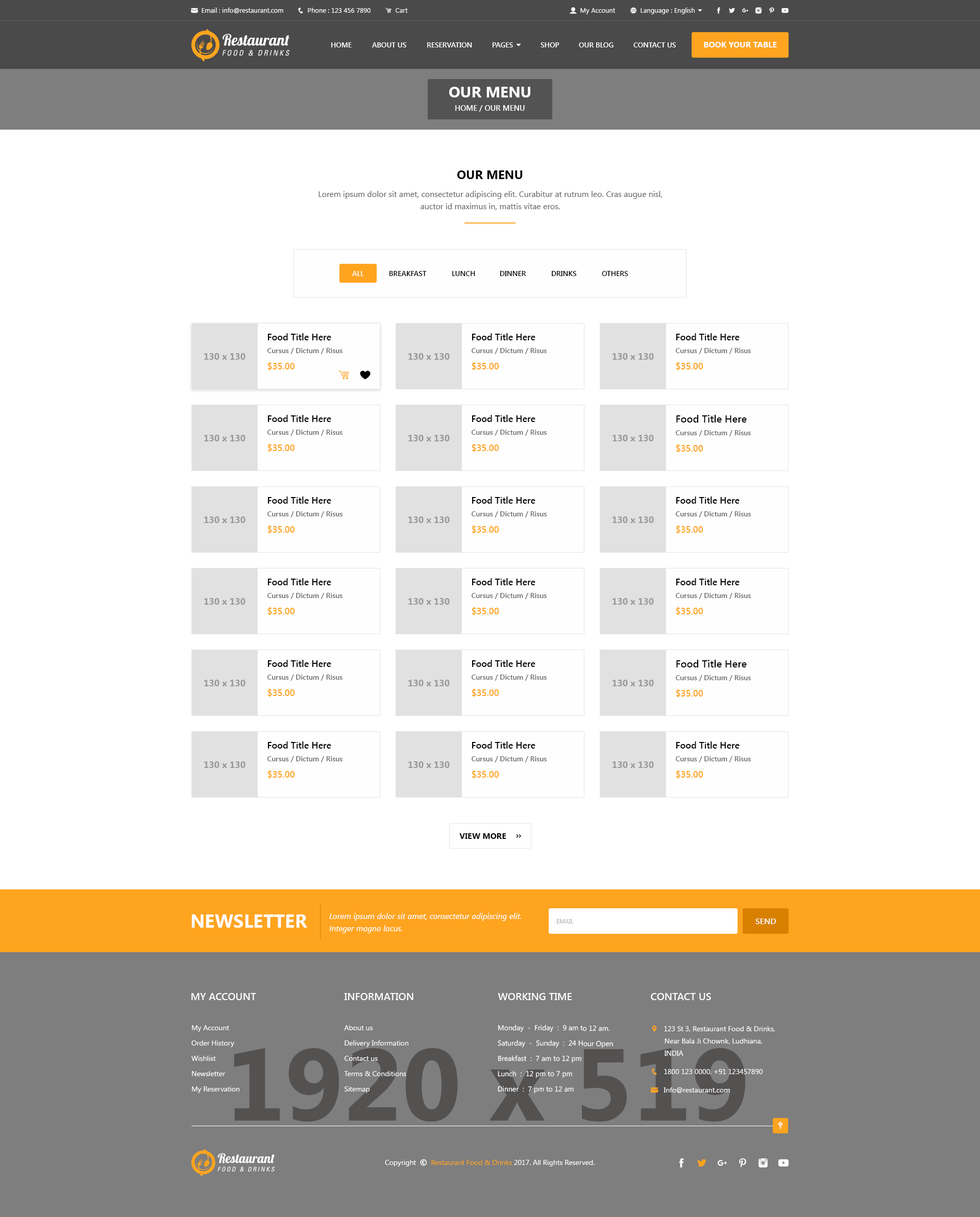
<style>
.page{position:relative;width:980px;height:1217px;background:#ffffff}
.page>*{position:absolute;margin:0}
.t1{font:8.2px "SegoeUI-Bold";color:#ffffff}
.t2{font:7.1px "SegoeUI-SemiBold";color:#ffffff}
.t3{font:15.3px "SegoeUI-Bold";color:#ffffff}
.t4{font:7.7px "SegoeUI-SemiBold";color:#ffffff}
.t5{font:12.2px "SegoeUI-Bold";color:#000000}
.t6{font:8.2px/12.2px "SegoeUI";color:#686868}
.t7{font:7.1px "SegoeUI-SemiBold";color:#000000}
.t8{font:9.2px "SegoeUI-SemiBold";color:#000000}
.t9{font:9.2px "SegoeUI-Bold";color:#999999}
.t10{font:7.1px "SegoeUI-SemiBold";color:#686868}
.t11{font:9.2px "SegoeUI-SemiBold";color:#ffa41f}
.t12{font:10.2px "SegoeUI-SemiBold";color:#000000}
.t13{font:8.2px "SegoeUI-Bold";color:#000000}
.t14{font:18.4px "SegoeUI-Bold";color:#ffffff}
.t15{font:8.2px/12.2px "SegoeUI-Italic";color:#ffffff}
.t16{font:6.1px "SegoeUI";color:#b2b2b2;text-transform:uppercase}
.t17{font:8.2px "SegoeUI-SemiBold";color:#ffffff}
.t18{font:10.2px "SegoeUI-SemiBold";color:#ffffff}
.t19{font:7.1px/15.3px "SegoeUI";color:#ffffff}
.t20{font:102.1px "SegoeUI-Bold";color:#545151}
</style>
<div class="page">
<p class="t1" style="left:704px;top:42px;width:73px;height:5px">BOOK YOUR TABLE</p>
<p class="t2" style="left:331px;top:42px;width:21px;height:5px">HOME</p>
<p class="t2" style="left:372px;top:42px;width:34px;height:5px">ABOUT US</p>
<p class="t2" style="left:427px;top:42px;width:45px;height:5px">RESERVATION</p>
<p class="t2" style="left:540px;top:42px;width:19px;height:5px">SHOP</p>
<p class="t2" style="left:579px;top:42px;width:34px;height:5px">OUR BLOG</p>
<p class="t2" style="left:633px;top:42px;width:43px;height:5px">CONTACT US</p>
<p class="t3" style="left:449px;top:87px;width:81px;height:10px">OUR MENU</p>
<p class="t4" style="left:455px;top:105px;width:70px;height:7px">HOME / OUR MENU</p>
<p class="t5" style="left:457px;top:170px;width:66px;height:9px">OUR MENU</p>
<p class="t6" style="left:318px;top:191px;width:344px;height:19px;text-align:center">Lorem ipsum dolor sit amet, consectetur adipiscing elit. Curabitur at rutrum leo. Cras augue nisl, auctor id maximus in, mattis vitae eros.</p>
<p class="t2" style="left:352px;top:271px;width:12px;height:5px">ALL</p>
<p class="t7" style="left:389px;top:271px;width:38px;height:5px">BREAKFAST</p>
<p class="t7" style="left:452px;top:271px;width:23px;height:5px">LUNCH</p>
<p class="t7" style="left:500px;top:271px;width:26px;height:5px">DINNER</p>
<p class="t7" style="left:552px;top:271px;width:25px;height:5px">DRINKS</p>
<p class="t7" style="left:602px;top:271px;width:26px;height:5px">OTHERS</p>
<p class="t8" style="left:267px;top:333px;width:64px;height:7px">Food Title Here</p>
<p class="t8" style="left:472px;top:333px;width:63px;height:7px">Food Title Here</p>
<p class="t8" style="left:676px;top:333px;width:63px;height:7px">Food Title Here</p>
<p class="t9" style="left:204px;top:353px;width:41px;height:7px">130 x 130</p>
<p class="t10" style="left:267px;top:348px;width:75px;height:6px">Cursus / Dictum / Risus</p>
<p class="t9" style="left:408px;top:353px;width:42px;height:7px">130 x 130</p>
<p class="t10" style="left:472px;top:348px;width:75px;height:6px">Cursus / Dictum / Risus</p>
<p class="t9" style="left:612px;top:353px;width:42px;height:7px">130 x 130</p>
<p class="t10" style="left:676px;top:348px;width:75px;height:6px">Cursus / Dictum / Risus</p>
<p class="t11" style="left:267px;top:362px;width:28px;height:8px">$35.00</p>
<p class="t11" style="left:472px;top:362px;width:27px;height:8px">$35.00</p>
<p class="t11" style="left:676px;top:362px;width:27px;height:8px">$35.00</p>
<p class="t8" style="left:267px;top:415px;width:64px;height:7px">Food Title Here</p>
<p class="t8" style="left:472px;top:415px;width:63px;height:7px">Food Title Here</p>
<p class="t12" style="left:676px;top:415px;width:71px;height:8px">Food Title Here</p>
<p class="t9" style="left:204px;top:435px;width:41px;height:6px">130 x 130</p>
<p class="t10" style="left:267px;top:430px;width:75px;height:6px">Cursus / Dictum / Risus</p>
<p class="t9" style="left:408px;top:435px;width:42px;height:6px">130 x 130</p>
<p class="t10" style="left:472px;top:430px;width:75px;height:6px">Cursus / Dictum / Risus</p>
<p class="t9" style="left:612px;top:435px;width:42px;height:6px">130 x 130</p>
<p class="t10" style="left:676px;top:430px;width:75px;height:6px">Cursus / Dictum / Risus</p>
<p class="t11" style="left:267px;top:443px;width:28px;height:9px">$35.00</p>
<p class="t11" style="left:472px;top:443px;width:27px;height:9px">$35.00</p>
<p class="t11" style="left:676px;top:444px;width:27px;height:9px">$35.00</p>
<p class="t8" style="left:267px;top:497px;width:64px;height:7px">Food Title Here</p>
<p class="t8" style="left:472px;top:497px;width:63px;height:7px">Food Title Here</p>
<p class="t8" style="left:676px;top:497px;width:63px;height:7px">Food Title Here</p>
<p class="t9" style="left:204px;top:516px;width:41px;height:7px">130 x 130</p>
<p class="t10" style="left:267px;top:511px;width:75px;height:6px">Cursus / Dictum / Risus</p>
<p class="t9" style="left:408px;top:516px;width:42px;height:7px">130 x 130</p>
<p class="t10" style="left:472px;top:511px;width:75px;height:6px">Cursus / Dictum / Risus</p>
<p class="t9" style="left:612px;top:516px;width:42px;height:7px">130 x 130</p>
<p class="t10" style="left:676px;top:511px;width:75px;height:6px">Cursus / Dictum / Risus</p>
<p class="t11" style="left:267px;top:525px;width:28px;height:9px">$35.00</p>
<p class="t11" style="left:472px;top:525px;width:27px;height:9px">$35.00</p>
<p class="t11" style="left:676px;top:525px;width:27px;height:9px">$35.00</p>
<p class="t8" style="left:267px;top:578px;width:64px;height:7px">Food Title Here</p>
<p class="t8" style="left:472px;top:578px;width:63px;height:7px">Food Title Here</p>
<p class="t8" style="left:676px;top:578px;width:63px;height:7px">Food Title Here</p>
<p class="t10" style="left:267px;top:593px;width:75px;height:6px">Cursus / Dictum / Risus</p>
<p class="t10" style="left:472px;top:593px;width:75px;height:6px">Cursus / Dictum / Risus</p>
<p class="t10" style="left:676px;top:593px;width:75px;height:6px">Cursus / Dictum / Risus</p>
<p class="t9" style="left:204px;top:598px;width:41px;height:7px">130 x 130</p>
<p class="t9" style="left:408px;top:598px;width:42px;height:7px">130 x 130</p>
<p class="t9" style="left:612px;top:598px;width:42px;height:7px">130 x 130</p>
<p class="t11" style="left:267px;top:607px;width:28px;height:8px">$35.00</p>
<p class="t11" style="left:472px;top:607px;width:27px;height:8px">$35.00</p>
<p class="t11" style="left:676px;top:607px;width:27px;height:8px">$35.00</p>
<p class="t8" style="left:267px;top:660px;width:64px;height:7px">Food Title Here</p>
<p class="t8" style="left:472px;top:660px;width:63px;height:7px">Food Title Here</p>
<p class="t12" style="left:676px;top:660px;width:71px;height:7px">Food Title Here</p>
<p class="t10" style="left:267px;top:675px;width:75px;height:6px">Cursus / Dictum / Risus</p>
<p class="t10" style="left:472px;top:675px;width:75px;height:6px">Cursus / Dictum / Risus</p>
<p class="t10" style="left:676px;top:675px;width:75px;height:6px">Cursus / Dictum / Risus</p>
<p class="t9" style="left:204px;top:680px;width:41px;height:6px">130 x 130</p>
<p class="t11" style="left:267px;top:688px;width:28px;height:9px">$35.00</p>
<p class="t9" style="left:408px;top:680px;width:42px;height:6px">130 x 130</p>
<p class="t11" style="left:472px;top:688px;width:27px;height:9px">$35.00</p>
<p class="t9" style="left:612px;top:680px;width:42px;height:6px">130 x 130</p>
<p class="t11" style="left:676px;top:689px;width:27px;height:9px">$35.00</p>
<p class="t8" style="left:267px;top:741px;width:64px;height:8px">Food Title Here</p>
<p class="t8" style="left:472px;top:741px;width:63px;height:8px">Food Title Here</p>
<p class="t8" style="left:676px;top:741px;width:63px;height:8px">Food Title Here</p>
<p class="t9" style="left:204px;top:761px;width:41px;height:7px">130 x 130</p>
<p class="t10" style="left:267px;top:756px;width:75px;height:6px">Cursus / Dictum / Risus</p>
<p class="t9" style="left:408px;top:761px;width:42px;height:7px">130 x 130</p>
<p class="t10" style="left:472px;top:756px;width:75px;height:6px">Cursus / Dictum / Risus</p>
<p class="t9" style="left:612px;top:761px;width:42px;height:7px">130 x 130</p>
<p class="t10" style="left:676px;top:756px;width:75px;height:6px">Cursus / Dictum / Risus</p>
<p class="t11" style="left:267px;top:770px;width:28px;height:9px">$35.00</p>
<p class="t11" style="left:472px;top:770px;width:27px;height:9px">$35.00</p>
<p class="t11" style="left:676px;top:770px;width:27px;height:9px">$35.00</p>
<p class="t13" style="left:459px;top:833px;width:47px;height:6px">VIEW MORE</p>
<p class="t14" style="left:191px;top:914px;width:116px;height:14px">NEWSLETTER</p>
<p class="t15" style="left:329px;top:913px;width:192px;height:20px">Lorem ipsum dolor sit amet, consectetur adipiscing elit. Integer magna lacus.</p>
<p class="t16" style="left:557px;top:919px;width:17px;height:5px">Email</p>
<p class="t17" style="left:755px;top:919px;width:21px;height:5px">SEND</p>
<p class="t18" style="left:191px;top:993px;width:65px;height:7px">MY ACCOUNT</p>
<p class="t18" style="left:344px;top:993px;width:69px;height:7px">INFORMATION</p>
<p class="t18" style="left:498px;top:993px;width:74px;height:7px">WORKING TIME</p>
<p class="t18" style="left:651px;top:993px;width:60px;height:7px">CONTACT US</p>
<p class="t19" style="left:191px;top:1025px;width:48px;height:68px">My Account<br>Order History<br>Wishlist<br>Newsletter<br>My Reservation</p>
<p class="t19" style="left:344px;top:1025px;width:64px;height:68px">About us<br>Delivery Information<br>Contact us<br>Terms &amp; Conditions<br>Sitemap</p>
<p class="t19" style="left:498px;top:1025px;width:115px;height:69px">Monday  -  Friday  :  9 am to 12 am.<br>Saturday  -  Sunday  :  24 Hour Open<br>Breakfast  :  7 am to 12 pm<br>Lunch  :  12 pm to 7 pm<br>Dinner  :  7 pm to 12 am</p>
<p class="t20" style="left:234px;top:1048px;width:512px;height:74px">1920 x 519</p>
</div>
